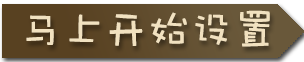
<style>
.page{position:relative;width:304px;height:62px}
.page>*{position:absolute;margin:0}
.t1{font:42.7px "DFPWaWaW5";color:#f1e1c0}
</style>
<div class="page">
<p class="t1" style="left:26px;top:10px;width:244px;height:37px">马上开始设置</p>
</div>
